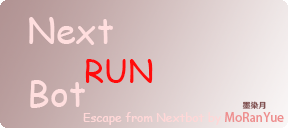
<style>
.page{position:relative;width:288px;height:128px}
.page>*{position:absolute;margin:0}
.t1{font:36px "ComicSansMS";color:#ffdede}
.t2{font:32px "ComicSansMS";color:#ff0c0c}
.t3{font:8px "HYWenHei-HEW";color:#804f4f}
.t4{font:12px "ComicSansMS";color:#ffd7d7}
.t5{font:12px "AdobeHeitiStd-Regular";color:#ee8f8f}
</style>
<div class="page">
<p class="t1" style="left:29px;top:17px;width:84px;height:91px">Next<br>Bot</p>
<p class="t2" style="left:85px;top:59px;width:68px;height:24px">RUN</p>
<p class="t3" style="left:242px;top:101px;width:24px;height:8px">墨染月</p>
<p class="t4" style="left:83px;top:112px;width:201px;height:13px">Escape from Nextbot by <span class="t5">MoRanYue</span></p>
</div>
